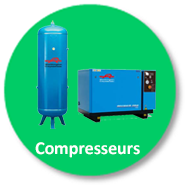
<style>
.page{position:relative;width:185px;height:185px;background:#00cc66}
.page>*{position:absolute;margin:0}
.t1{font:18px "Calibri-Bold";color:#ffffff}
</style>
<div class="page">
<p class="t1" style="left:35px;top:142px;width:105px;height:16px">Compresseurs</p>
</div>
